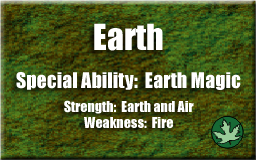
<style>
.page{position:relative;width:256px;height:160px}
.page>*{position:absolute;margin:0}
.t1{font:33.3px "Impact";color:#ffffff}
.t2{font:20px "Impact";color:#ffffff}
.t3{font:14px "Impact";color:#ffffff}
</style>
<div class="page">
<p class="t1" style="left:94px;top:23px;width:69px;height:28px">Earth</p>
<p class="t2" style="left:16px;top:72px;width:225px;height:18px">Special Ability:  Earth Magic</p>
<p class="t3" style="left:64px;top:100px;width:130px;height:14px">Strength:  Earth and Air</p>
<p class="t3" style="left:84px;top:117px;width:89px;height:11px">Weakness:  Fire</p>
</div>
